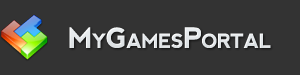
<style>
.page{position:relative;width:300px;height:75px;background:#333333}
.page>*{position:absolute;margin:0}
.t1{font:28px "nevis-Bold";letter-spacing:-0.025em;color:#e4e8ea;font-variant:small-caps}
</style>
<div class="page">
<p class="t1" style="left:69px;top:27px;width:202px;height:21px">MyGamesPortal</p>
</div>
